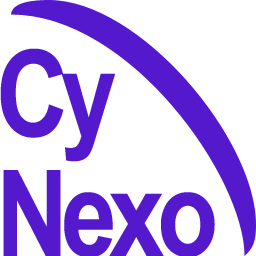
<style>
.page{position:relative;width:256px;height:256px;background:#ffffff}
.page>*{position:absolute;margin:0}
.t1{font:120px "Arial-BoldMT";letter-spacing:-0.075em;color:#5419cc;scale:0.83 1}
</style>
<div class="page">
<p class="t1" style="left:0px;top:48px;width:215px;height:210px">Cy<br>Nexo</p>
</div>
